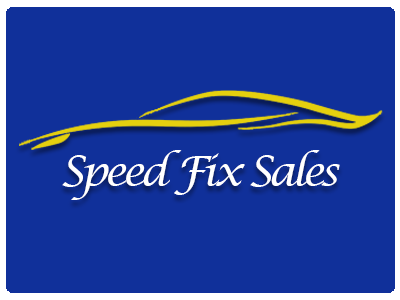
<style>
.page{position:relative;width:400px;height:300px;background:#10309a}
.page>*{position:absolute;margin:0}
.t1{font:41.7px "LucidaCalligraphy-Italic";letter-spacing:-0.1em;color:#ffffff}
</style>
<div class="page">
<p class="t1" style="left:62px;top:150px;width:278px;height:50px">Speed Fix Sales</p>
</div>
